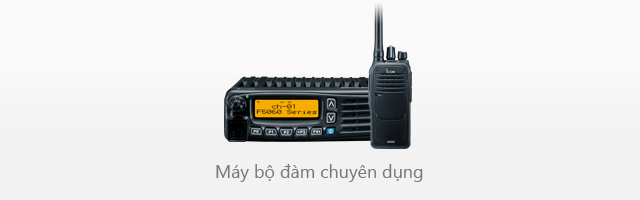
<style>
.page{position:relative;width:640px;height:200px;background:#fafafa}
.page>*{position:absolute;margin:0}
.t1{font:18px "SegoeUI";color:#797979}
</style>
<div class="page">
<p class="t1" style="left:216px;top:164px;width:207px;height:18px">Máy bộ đàm chuyên dụng</p>
</div>
